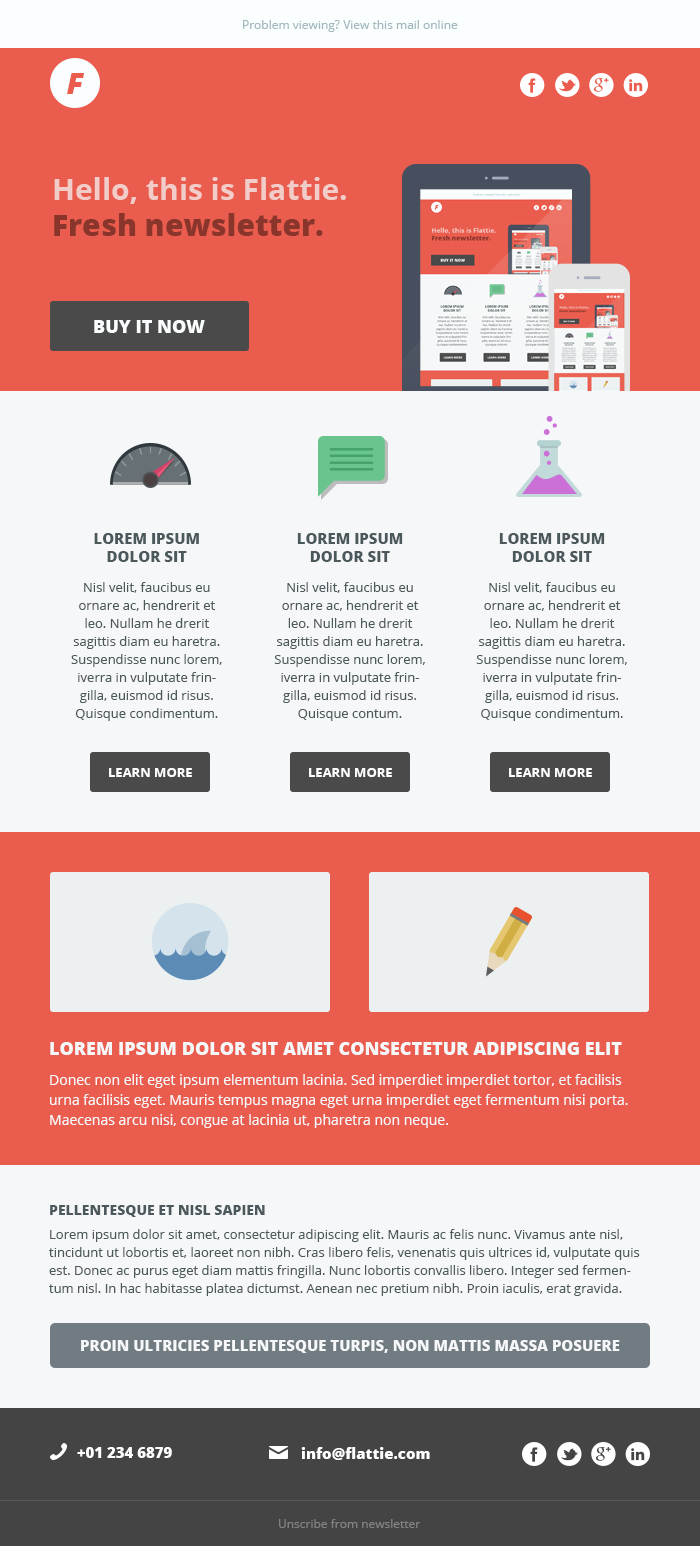
<style>
.page{position:relative;width:700px;height:1546px;background:#f6f7f8}
.page>*{position:absolute;margin:0}
.t1{font:12px "OpenSans";color:#9fb7bd}
.t2{font:30px "OpenSans-ExtraboldItalic";color:#ea5d4e}
.t3{font:30px/36px "OpenSans-Bold";color:#f1ccc8}
.t4{font:30px/36px "OpenSans-Extrabold";color:#89352c}
.t5{font:18px "OpenSans-Extrabold";color:#fafeff;text-transform:uppercase}
.t6{font:13px/18px "OpenSans";color:#4c595c}
.t7{font:15px "OpenSans-Extrabold";color:#4c595c;text-transform:uppercase}
.t8{font:13px/30px "OpenSans";color:#4c595c}
.t9{font:13px "OpenSans-Bold";color:#ffffff;text-transform:uppercase}
.t10{font:14px/20px "OpenSans";color:#f6f7f8}
.t11{font:18px/24px "OpenSans-Extrabold";color:#f6f7f8;text-transform:uppercase}
.t12{font:14px/30px "OpenSans";color:#f6f7f8}
.t13{font:14px "OpenSans";color:#f6f7f8}
.t14{font:14px/18px "OpenSans-Extrabold";color:#4c595c;text-transform:uppercase}
.t15{font:13px/24px "OpenSans";color:#4c595c}
.t16{font:15px "OpenSans-Extrabold";color:#f6f7f8;text-transform:uppercase}
.t17{font:15px "OpenSans-Extrabold";color:#ffffff}
.t18{font:12px "OpenSans";color:#838383}
</style>
<div class="page">
<p class="t1" style="left:243px;top:20px;width:215px;height:12px">Problem viewing? View this mail online</p>
<p class="t2" style="left:67px;top:73px;width:18px;height:21px">F</p>
<p class="t3" style="left:54px;top:177px;width:292px;height:59px">Hello, this is Flattie.<br><span class="t4">Fresh newsletter.</span></p>
<p class="t5" style="left:94px;top:320px;width:111px;height:13px">Buy it now</p>
<p class="t6" style="left:71px;top:533px;width:151px;height:188px;text-align:center"><span class="t7">Lorem ipsum dolor sit<br></span><span class="t8">Nisl velit, faucibus eu </span>ornare ac, hendrerit et leo. Nullam he drerit sagittis diam eu haretra. Suspendisse nunc lorem, iverra in vulputate fringilla, euismod id risus. Quisque condimentum.</p>
<p class="t6" style="left:274px;top:533px;width:151px;height:188px;text-align:center"><span class="t7">Lorem ipsum dolor sit<br></span><span class="t8">Nisl velit, faucibus eu </span>ornare ac, hendrerit et leo. Nullam he drerit sagittis diam eu haretra. Suspendisse nunc lorem, iverra in vulputate fringilla, euismod id risus. Quisque contum.</p>
<p class="t6" style="left:476px;top:533px;width:151px;height:188px;text-align:center"><span class="t7">Lorem ipsum dolor sit<br></span><span class="t8">Nisl velit, faucibus eu </span>ornare ac, hendrerit et leo. Nullam he drerit sagittis diam eu haretra. Suspendisse nunc lorem, iverra in vulputate fringilla, euismod id risus. Quisque condimentum.</p>
<p class="t9" style="left:109px;top:768px;width:83px;height:9px">Learn more</p>
<p class="t9" style="left:309px;top:768px;width:83px;height:9px">Learn more</p>
<p class="t9" style="left:509px;top:768px;width:83px;height:9px">Learn more</p>
<p class="t10" style="left:50px;top:1042px;width:578px;height:86px"><span class="t11">Lorem ipsum dolor sit amet consectetur adipiscing elit<br></span><span class="t12">Donec non elit eget ipsum elementum lacinia. Sed imperdiet imperdiet </span><span class="t13">tortor, et facilisis </span>urna facilisis eget. Mauris tempus magna eget urna imperdiet eget fermentum nisi porta. Maecenas arcu nisi, congue at lacinia ut, pharetra non neque.</p>
<p class="t6" style="left:49px;top:1205px;width:591px;height:91px"><span class="t14">Pellentesque et nisl sapien<br></span><span class="t15">Lorem ipsum dolor sit amet, consectetur adipiscing elit. Mauris ac felis nunc. Vivamus ante nisl, </span>tincidunt ut lobortis et, laoreet non nibh. Cras libero felis, venenatis quis ultrices id, vulputate quis est. Donec ac purus eget diam mattis fringilla. Nunc lobortis convallis libero. Integer sed fermentum nisl. In hac habitasse platea dictumst. Aenean nec pretium nibh. Proin iaculis, erat gravida.</p>
<p class="t16" style="left:81px;top:1340px;width:539px;height:13px">Proin ultricies pellentesque turpis, non mattis massa posuere</p>
<p class="t17" style="left:77px;top:1447px;width:95px;height:11px">+01 234 6879</p>
<p class="t17" style="left:301px;top:1447px;width:129px;height:13px">info@flattie.com</p>
<p class="t18" style="left:279px;top:1519px;width:142px;height:9px">Unscribe from newsletter</p>
</div>
